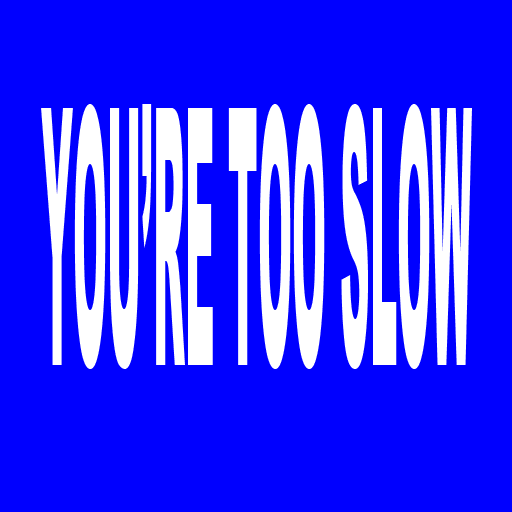
<style>
.page{position:relative;width:512px;height:512px;background:#0000ff}
.page>*{position:absolute;margin:0}
.t1{font:358.9px "Arial-Black";color:#ffffff;scale:0.11 1}
</style>
<div class="page">
<p class="t1" style="left:41px;top:104px;width:431px;height:265px">YOU’RE TOO SLOW</p>
</div>
